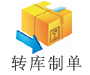
<style>
.page{position:relative;width:90px;height:75px;background:#ffffff}
.page>*{position:absolute;margin:0}
.t1{font:16.5px "SimSun";letter-spacing:0.13em;color:#403a3a}
</style>
<div class="page">
<p class="t1" style="left:11px;top:55px;width:71px;height:16px">转库制单</p>
</div>
